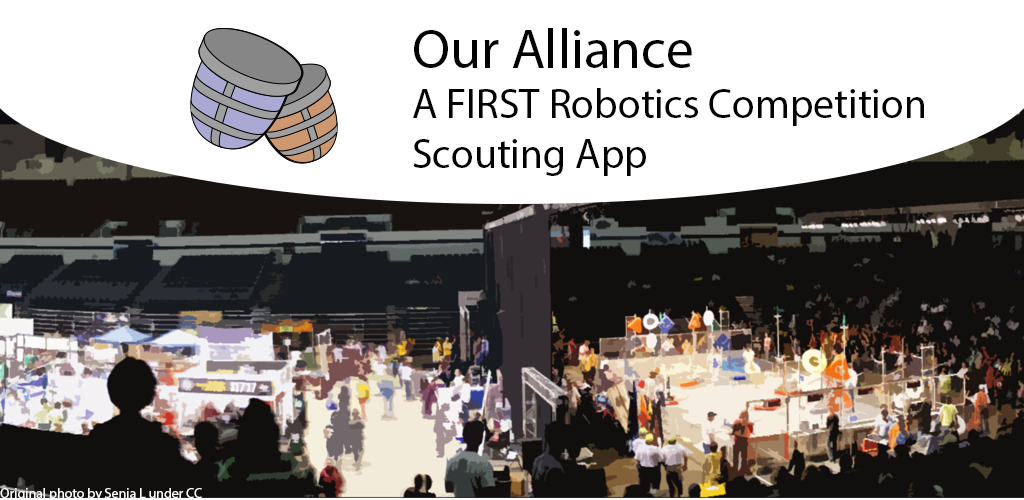
<style>
.page{position:relative;width:1024px;height:500px;background:#ffffff}
.page>*{position:absolute;margin:0}
.t1{font:41.7px "MyriadPro-Regular";color:#000000}
.t2{font:55.6px "MyriadPro-Regular";color:#000000}
.t3{font:13.9px "MyriadPro-Regular";color:#ffffff}
</style>
<div class="page">
<p class="t1" style="left:413px;top:28px;width:511px;height:148px"><span class="t2">Our Alliance<br></span>A FIRST Robotics Competition<br>Scouting App</p>
<p class="t3" style="left:0px;top:488px;width:202px;height:13px">Original photo by Senia L under CC</p>
</div>
